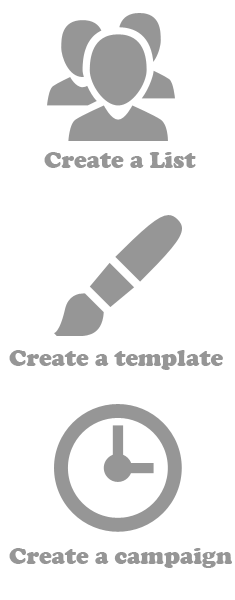
<style>
.page{position:relative;width:235px;height:600px;background:#ffffff}
.page>*{position:absolute;margin:0}
.t1{font:24px "CooperBlack";color:#969696}
</style>
<div class="page">
<p class="t1" style="left:44px;top:152px;width:152px;height:16px">Create a List</p>
<p class="t1" style="left:9px;top:350px;width:214px;height:20px">Create a template</p>
<p class="t1" style="left:9px;top:548px;width:223px;height:20px">Create a campaign</p>
</div>
